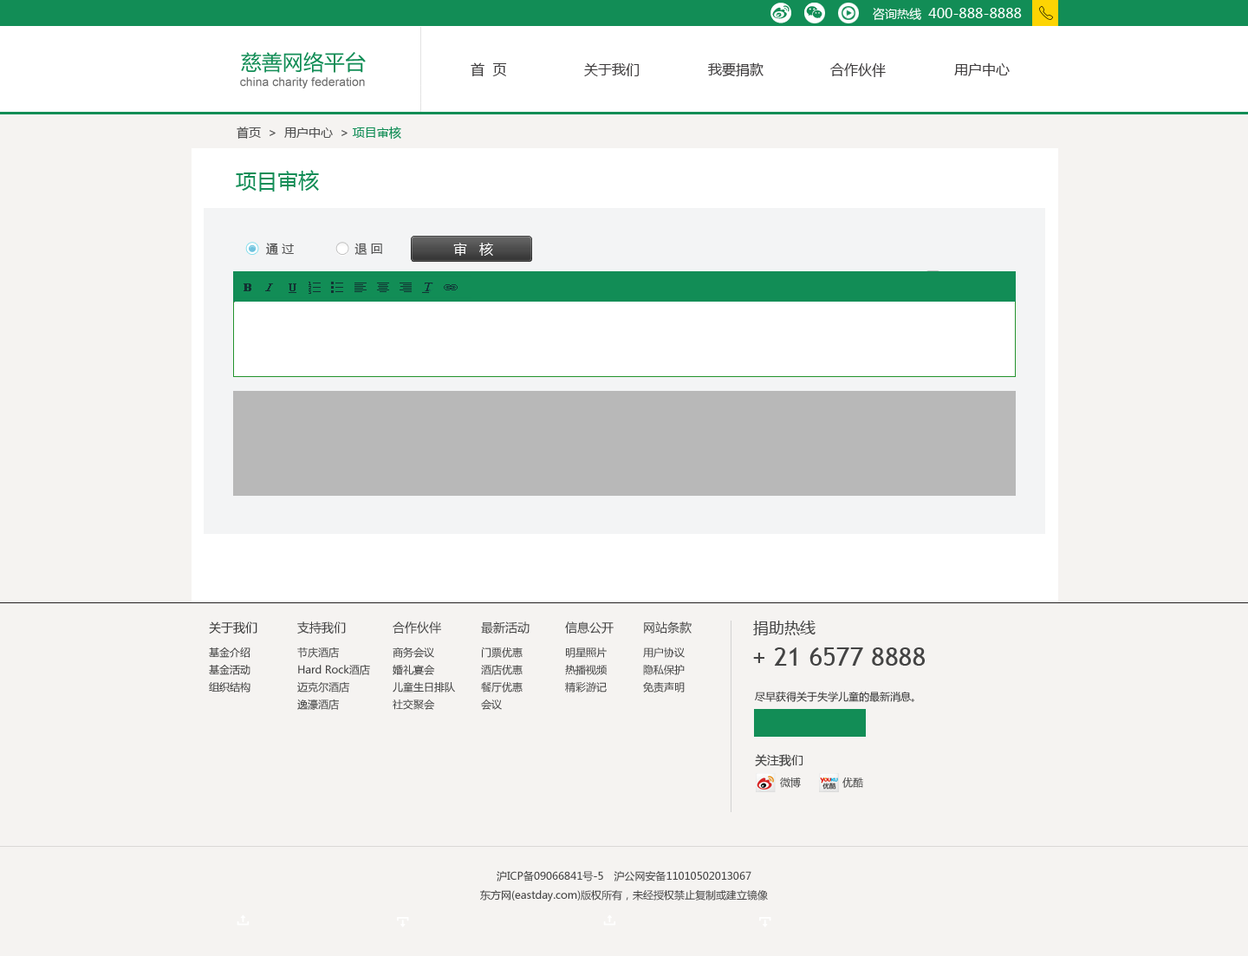
<style>
.page{position:relative;width:1248px;height:956px;background:#f5f3f1}
.page>*{position:absolute;margin:0}
.t1{font:13.9px "MicrosoftYaHei";color:#ffffff}
.t2{font:12.1px "MicrosoftYaHei";color:#ffffff}
.t3{font:20.8px "MicrosoftYaHei";color:#128d56}
.t4{font:13.9px "MicrosoftYaHei";color:#3c3a3b}
.t5{font:12.1px "ArialMT";color:#6c6c6c}
.t6{font:12.1px "MicrosoftYaHei";color:#505050}
.t7{font:12.1px "MicrosoftYaHei";color:#128d56}
.t8{font:10.4px/17.3px "MicrosoftYaHei";color:#3a3a3a}
.t9{font:12.1px/26px "MicrosoftYaHei";color:#3a3a3a}
.t10{font:10.4px/17.3px "MicrosoftYaHei";color:#444444}
.t11{font:12.1px/26px "MicrosoftYaHei";color:#444444}
.t12{font:15.6px "MicrosoftYaHei";color:#444444}
.t13{font:26px "TrebuchetMS";color:#444444}
.t14{font:10.4px "MicrosoftYaHei";color:#323232}
.t15{font:12.1px "MicrosoftYaHei";color:#444444}
.t16{font:10.4px "MicrosoftYaHei";color:#444444}
.t17{font:10.4px/19.1px "MicrosoftYaHei";color:#444444}
</style>
<div class="page">
<p class="t1" style="left:873px;top:8px;width:149px;height:13px"><span class="t2">咨询热线  </span>400-888-8888</p>
<p class="t3" style="left:241px;top:52px;width:125px;height:21px">慈善网络平台</p>
<p class="t4" style="left:470px;top:62px;width:37px;height:15px">首  页</p>
<p class="t4" style="left:584px;top:63px;width:55px;height:13px">关于我们</p>
<p class="t4" style="left:708px;top:62px;width:55px;height:14px">我要捐款</p>
<p class="t4" style="left:830px;top:63px;width:56px;height:14px">合作伙伴</p>
<p class="t4" style="left:954px;top:63px;width:55px;height:13px">用户中心</p>
<p class="t5" style="left:240px;top:77px;width:125px;height:11px">china charity federation</p>
<p class="t6" style="left:237px;top:127px;width:164px;height:12px">首页  &gt;  用户中心  &gt; <span class="t7">项目审核</span></p>
<p class="t3" style="left:236px;top:170px;width:83px;height:21px">项目审核</p>
<p class="t6" style="left:266px;top:243px;width:116px;height:12px">通 过                 退 回</p>
<p class="t1" style="left:453px;top:243px;width:40px;height:13px">审   核</p>
<p class="t8" style="left:209px;top:621px;width:48px;height:71px"><span class="t9">关于我们 <br></span>基金介绍<br>基金活动<br>组织结构</p>
<p class="t10" style="left:297px;top:621px;width:73px;height:89px"><span class="t11">支持我们<br></span>节庆酒店<br>Hard Rock酒店<br>迈克尔酒店<br>逸濠酒店</p>
<p class="t10" style="left:393px;top:621px;width:62px;height:89px"><span class="t11">合作伙伴<br></span>商务会议<br>婚礼宴会<br>儿童生日排队<br>社交聚会</p>
<p class="t10" style="left:481px;top:621px;width:48px;height:89px"><span class="t11">最新活动<br></span>门票优惠<br>酒店优惠<br>餐厅优惠<br>会议</p>
<p class="t10" style="left:565px;top:621px;width:48px;height:71px"><span class="t11">信息公开<br></span>明星照片<br>热播视频<br>精彩游记</p>
<p class="t10" style="left:643px;top:621px;width:48px;height:71px"><span class="t11">网站条款<br></span>用户协议<br>隐私保护<br>免责声明</p>
<p class="t12" style="left:753px;top:620px;width:62px;height:15px">捐助热线</p>
<p class="t13" style="left:753px;top:647px;width:172px;height:18px">+ 21 6577 8888</p>
<p class="t14" style="left:755px;top:691px;width:159px;height:11px">尽早获得关于失学儿童的最新消息。</p>
<p class="t15" style="left:755px;top:754px;width:48px;height:13px">关注我们</p>
<p class="t16" style="left:780px;top:777px;width:21px;height:11px">微博</p>
<p class="t16" style="left:842px;top:777px;width:21px;height:11px">优酷</p>
<p class="t17" style="left:480px;top:870px;width:288px;height:31px;text-align:center">沪ICP备09066841号-5　沪公网安备11010502013067<br>东方网(eastday.com)版权所有，未经授权禁止复制或建立镜像</p>
</div>
